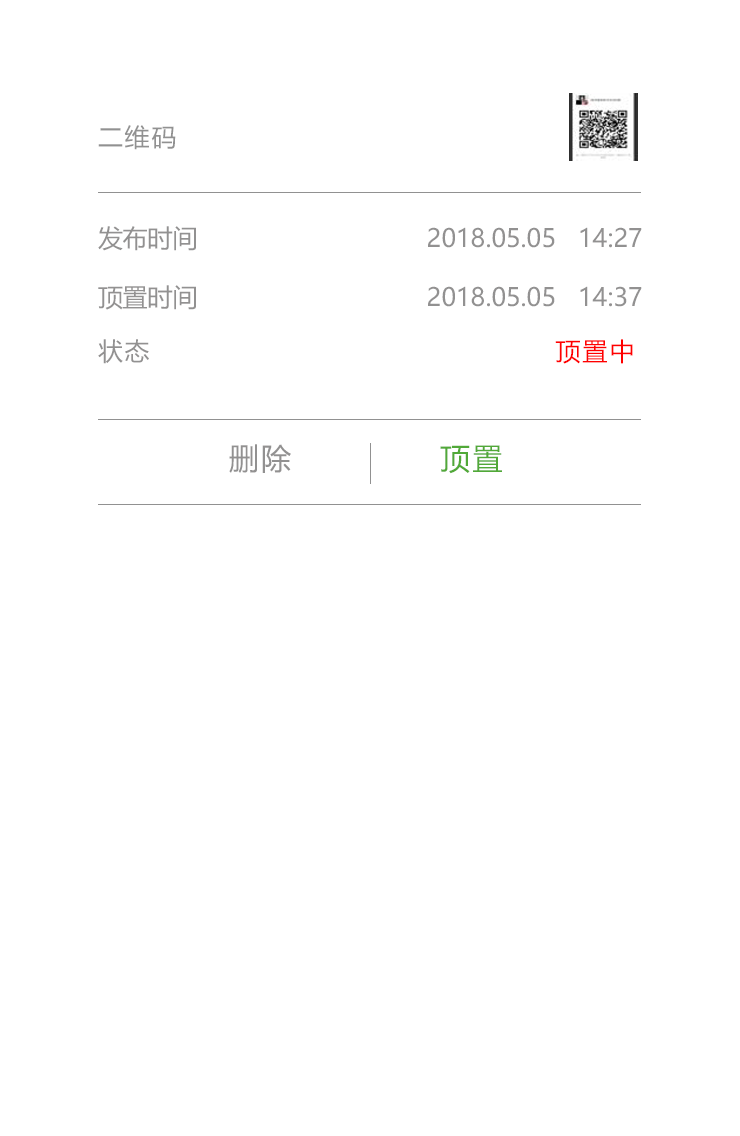
<style>
.page{position:relative;width:740px;height:1136px;background:#ffffff}
.page>*{position:absolute;margin:0}
.t1{font:25px "MicrosoftYaHei";letter-spacing:0.08em;color:#919191}
.t2{font:25px "MicrosoftYaHei";color:#929191}
.t3{font:25px "MicrosoftYaHei";letter-spacing:0.08em;color:#ff0000}
.t4{font:25px "MicrosoftYaHei";letter-spacing:0.08em;color:#929191}
.t5{font:30px "MicrosoftYaHei";letter-spacing:0.08em;color:#929191}
.t6{font:30px "MicrosoftYaHei";letter-spacing:0.08em;color:#51a938}
</style>
<div class="page">
<p class="t1" style="left:98px;top:125px;width:78px;height:25px">二维码</p>
<p class="t2" style="left:98px;top:226px;width:544px;height:25px">发布时间                               2018.05.05   14:27</p>
<p class="t2" style="left:98px;top:285px;width:544px;height:25px">顶置时间                               2018.05.05   14:37</p>
<p class="t3" style="left:98px;top:339px;width:535px;height:25px"><span class="t4">状态                                           </span>顶置中</p>
<p class="t5" style="left:229px;top:444px;width:273px;height:30px">删除             <span class="t6">顶置</span></p>
</div>
